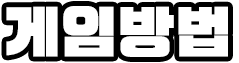
<style>
.page{position:relative;width:239px;height:63px;background:#ffffff}
.page>*{position:absolute;margin:0}
.t1{font:55.3px "KoreanCUBE-R";letter-spacing:0.065em;color:#ffffff}
</style>
<div class="page">
<p class="t1" style="left:6px;top:6px;width:222px;height:51px">게임방법</p>
</div>
